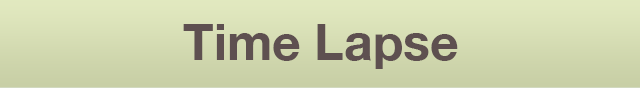
<style>
.page{position:relative;width:640px;height:88px}
.page>*{position:absolute;margin:0}
.t1{font:50px "HelveticaNeue-Bold";color:#5e5050}
</style>
<div class="page">
<p class="t1" style="left:183px;top:24px;width:275px;height:45px">Time Lapse</p>
</div>
